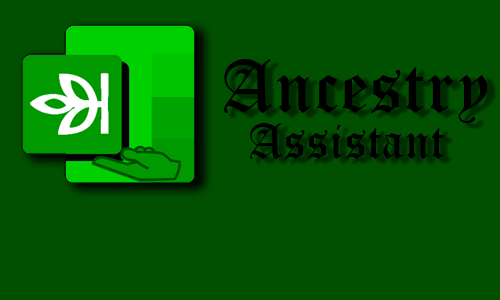
<style>
.page{position:relative;width:500px;height:300px;background:#005000}
.page>*{position:absolute;margin:0}
.t1{font:72px "OldEnglishTextMT";letter-spacing:0.025em;color:#000000}
.t2{font:48px "OldEnglishTextMT";letter-spacing:0.025em;color:#000000}
</style>
<div class="page">
<p class="t1" style="left:224px;top:59px;width:264px;height:64px">Ancestry</p>
<p class="t2" style="left:250px;top:123px;width:194px;height:36px">Assistant</p>
</div>
